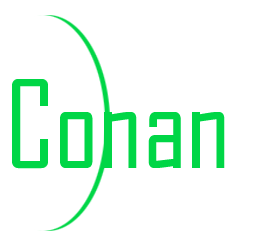
<style>
.page{position:relative;width:259px;height:240px;background:#ffffff}
.page>*{position:absolute;margin:0}
.t1{font:116.7px "AgencyFB-Reg";color:#00d646}
</style>
<div class="page">
<p class="t1" style="left:12px;top:79px;width:213px;height:90px">Conan</p>
</div>
